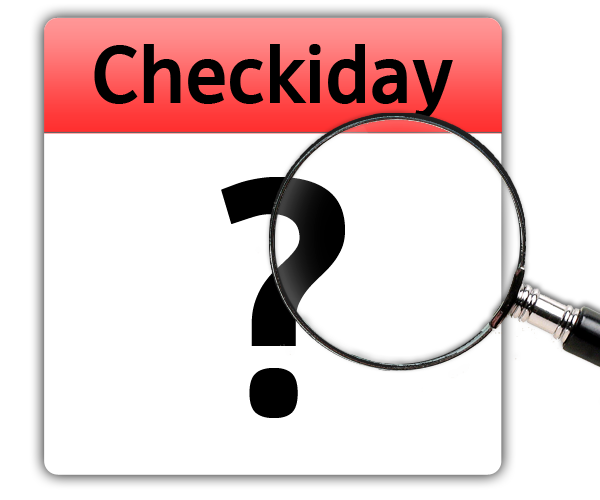
<style>
.page{position:relative;width:600px;height:500px;background:#ffffff}
.page>*{position:absolute;margin:0}
.t1{font:77.7px "DejaWeb-Bold";color:#000000}
.t2{font:319.8px "DejaWeb-Bold";color:#000000}
</style>
<div class="page">
<p class="t1" style="left:94px;top:44px;width:359px;height:76px">Checkiday</p>
<p class="t2" style="left:221px;top:177px;width:124px;height:241px">?</p>
</div>
